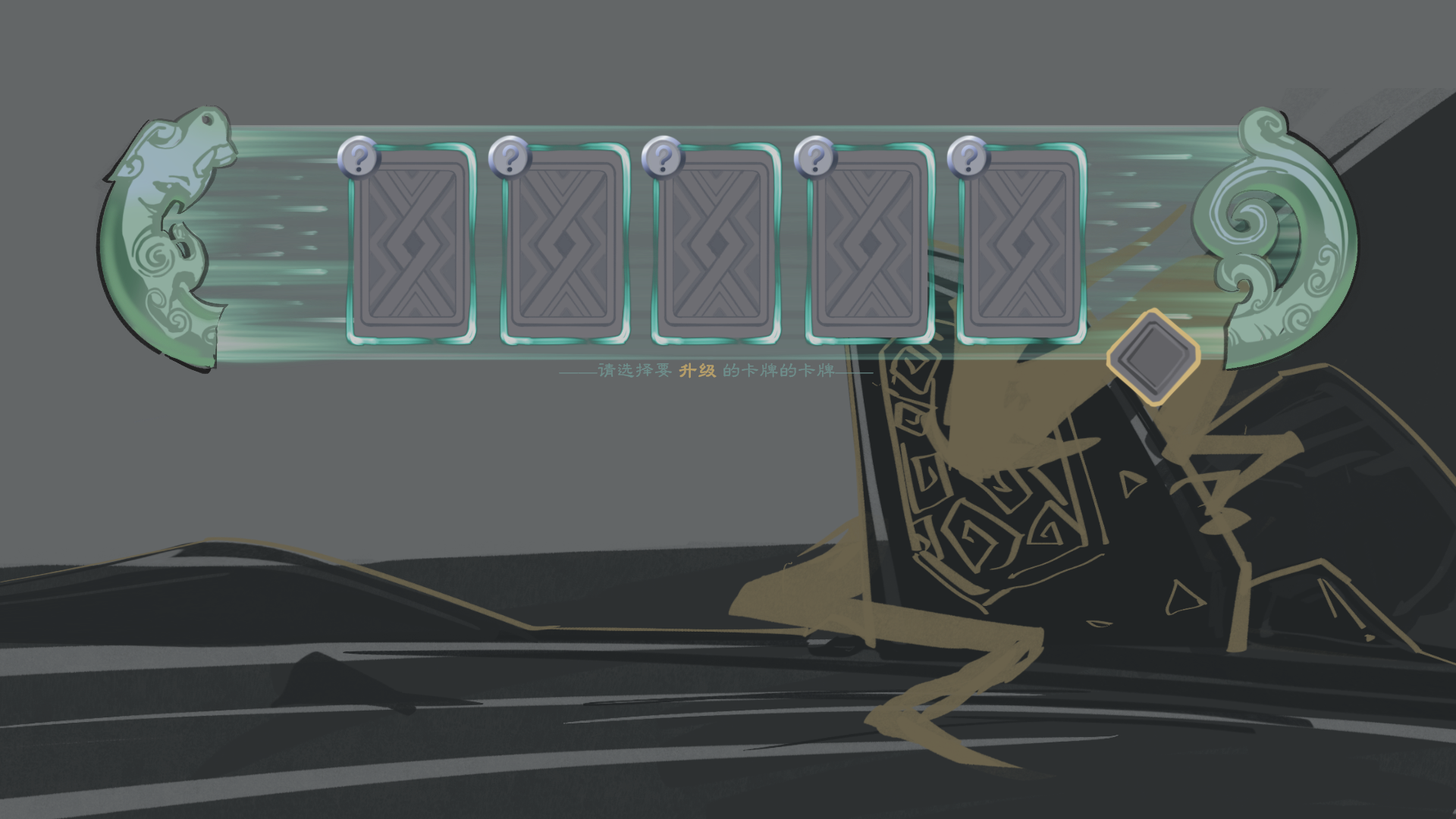
<style>
.page{position:relative;width:1456px;height:819px;background:#636667}
.page>*{position:absolute;margin:0}
.t1{font:19px "FZLBJW--GB1-0";color:#6d8f8c}
.t2{font:19px "FZLBJW--GB1-0";color:#b69e68;font-weight:bold}
</style>
<div class="page">
<p class="t1" style="left:559px;top:362px;width:315px;height:16px">——请选择要 <span class="t2">升级 </span>的卡牌的卡牌——</p>
</div>
